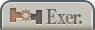
<style>
.page{position:relative;width:95px;height:30px;background:#c5c2b9}
.page>*{position:absolute;margin:0}
.t1{font:20px "RyuminPro-ExBold";letter-spacing:-0.08em;color:#696660;scale:0.9 1}
</style>
<div class="page">
<p class="t1" style="left:46px;top:9px;width:36px;height:15px">Exer.</p>
</div>
